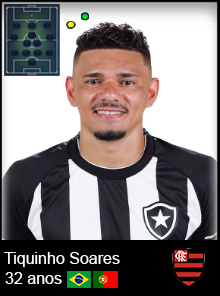
<style>
.page{position:relative;width:220px;height:296px}
.page>*{position:absolute;margin:0}
.t1{font:16px "ArialMT";color:#ffffff}
</style>
<div class="page">
<p class="t1" style="left:4px;top:252px;width:116px;height:15px">Tiquinho Soares</p>
<p class="t1" style="left:5px;top:272px;width:57px;height:12px">32 anos</p>
</div>
